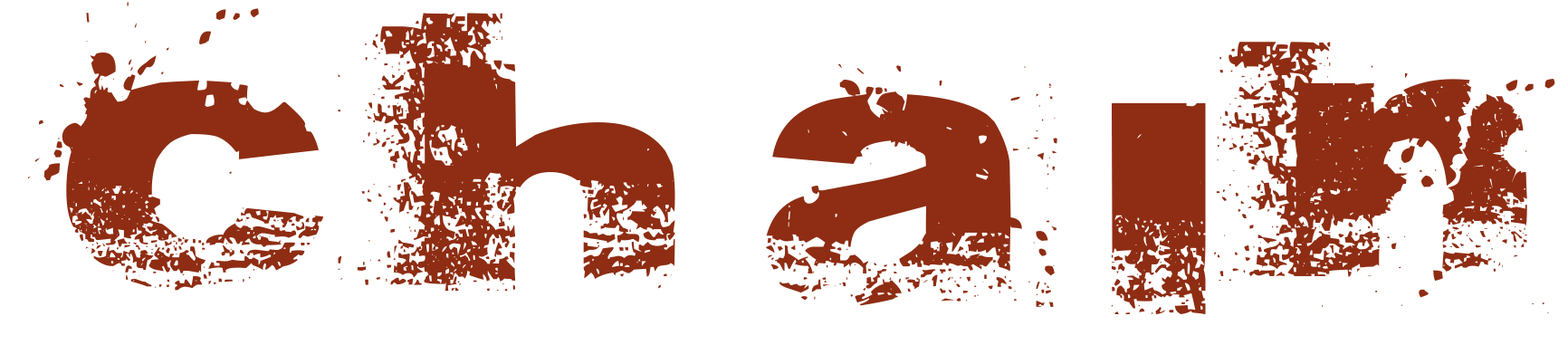
<style>
.page{position:relative;width:1568px;height:345px;background:#ffffff}
.page>*{position:absolute;margin:0}
.t1{font:271.6px "Abite";letter-spacing:0.025em;color:#8e2d13}
</style>
<div class="page">
<p class="t1" style="left:28px;top:2px;width:1527px;height:312px">C H A I N</p>
</div>
